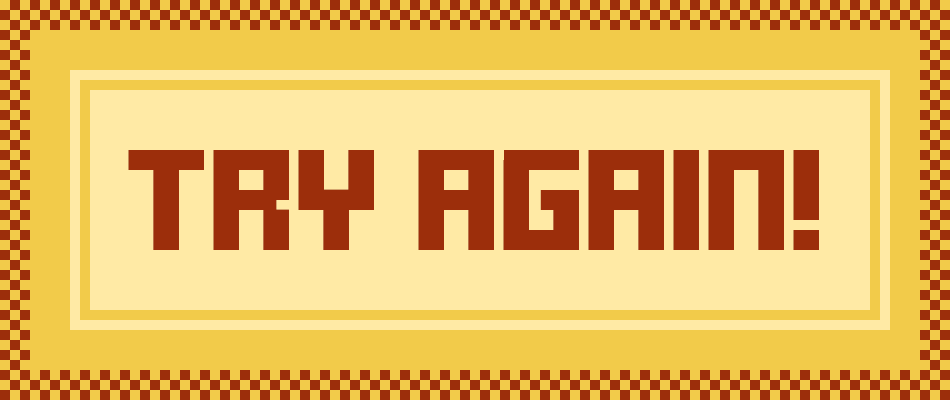
<style>
.page{position:relative;width:950px;height:400px;background:#ffeaa5}
.page>*{position:absolute;margin:0}
.t1{font:80px "FFFForward";letter-spacing:-0.025em;color:#9c2e0b;scale:1.25 1}
</style>
<div class="page">
<p class="t1" style="left:128px;top:150px;width:691px;height:100px">TRY AGAIN!</p>
</div>
